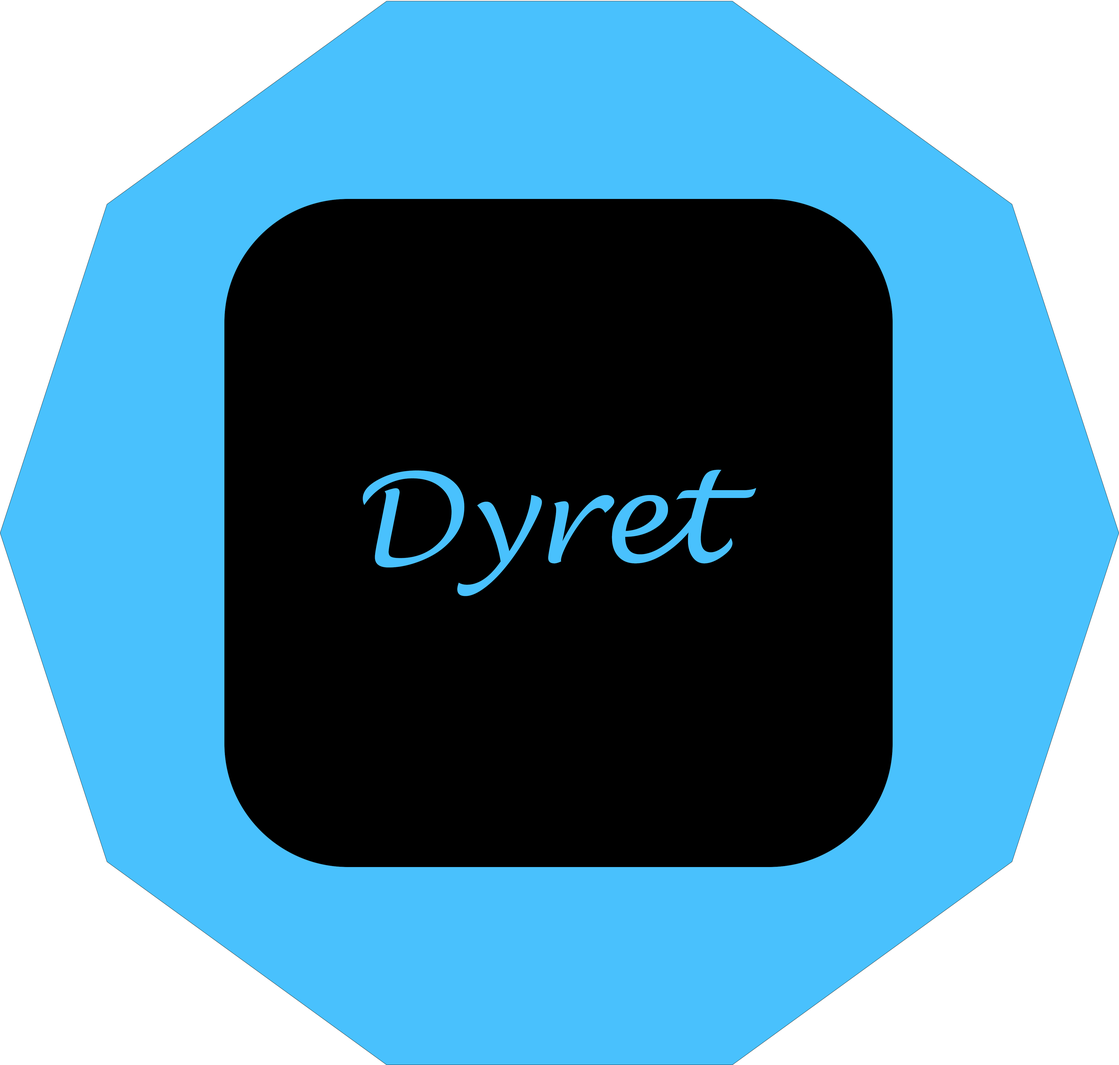
<style>
.page{position:relative;width:1119px;height:1065px;background:#49c1fd}
.page>*{position:absolute;margin:0}
.t1{font:123.3px "LucidaHandwriting-Italic";color:#49c1fd}
</style>
<div class="page">
<p class="t1" style="left:363px;top:470px;width:393px;height:126px">Dyret</p>
</div>
